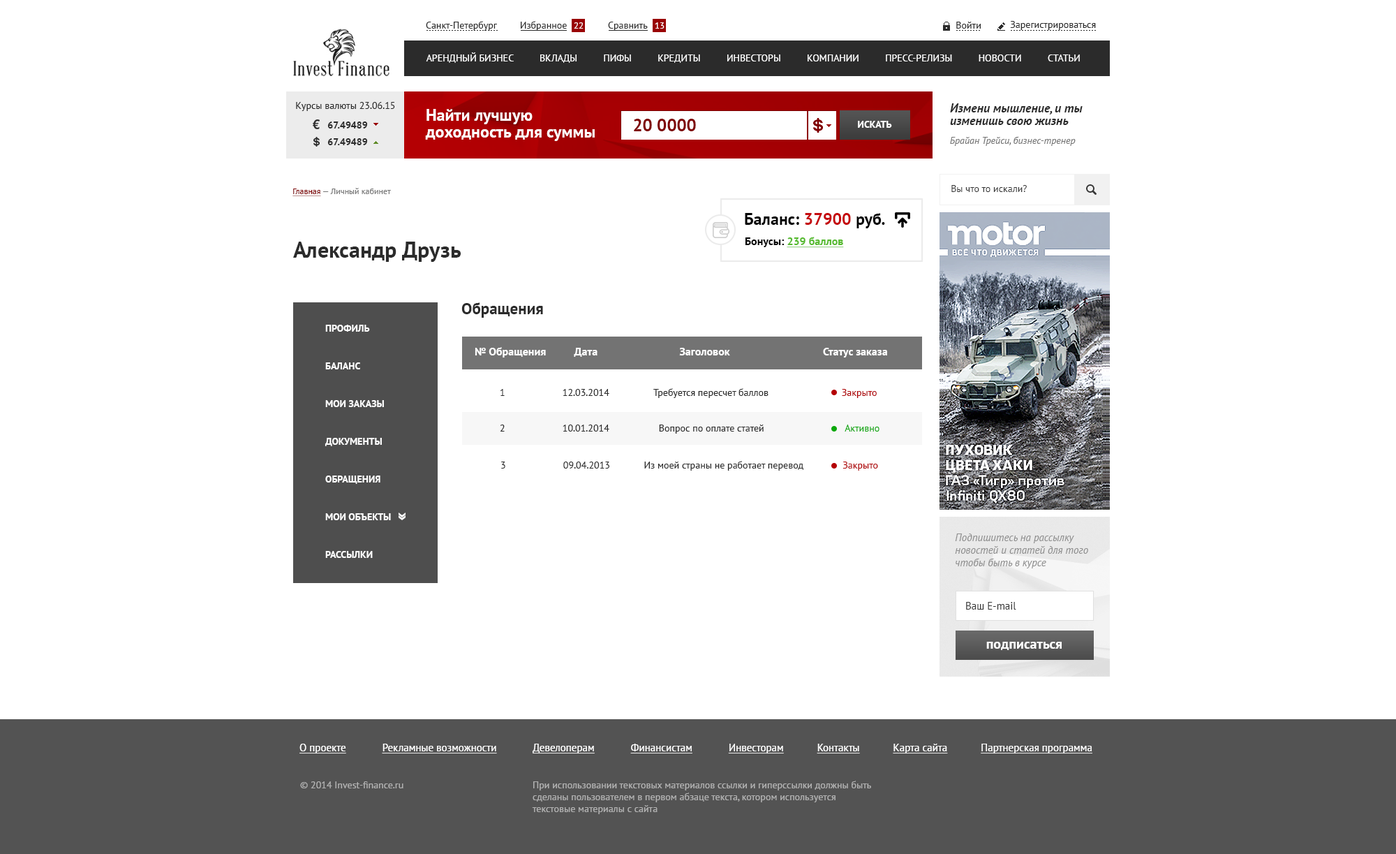
<style>
.page{position:relative;width:1396px;height:854px;background:#ffffff}
.page>*{position:absolute;margin:0}
.t1{font:9.8px "PTSans-Regular";color:#2b2b2b}
.t2{font:9.1px "PTSans-Regular";color:#ffffff}
.t3{font:9.8px "PTSans-Regular";color:#ffffff;text-transform:uppercase}
.t4{font:16.8px/16.8px "PTSans-Bold";color:#ffffff}
.t5{font:12.6px/12.6px "PTSans-BoldItalic";color:#2b2b2b}
.t6{font:9.8px/16.8px "PTSans-Bold";color:#2b2b2b}
.t7{font:17.5px "PTSans-Bold";color:#7f0002}
.t8{font:9.8px "PTSans-Bold";color:#ffffff;text-transform:uppercase}
.t9{font:9.8px "PTSans-Italic";color:#777777}
.t10{font:8.4px "PTSans-Regular";color:#777777}
.t11{font:8.4px "PTSans-Regular";color:#7f0002;text-decoration:underline}
.t12{font:16.8px "PTSans-Bold";color:#040404}
.t13{font:16.8px "PTSans-Bold";color:#c50a0e}
.t14{font:22.3px "PTSans-Bold";color:#2b2b2b}
.t15{font:11.2px "PTSans-Bold";color:#56bb2e;text-decoration:underline}
.t16{font:11.2px "PTSans-Bold";color:#040404}
.t17{font:16.1px "PTSans-Bold";color:#2b2b2b}
.t18{font:9.8px/12.6px "PTSans-Bold";color:#ffffff;text-transform:uppercase}
.t19{font:11.2px "PTSans-Bold";color:#ffffff}
.t20{font:9.8px "PTSans-Regular";color:#b00003}
.t21{font:9.8px "PTSans-Regular";color:#0ba80b}
.t22{font:10.5px/12.6px "PTSans-Italic";color:#777777}
.t23{font:10.5px "PTSans-Regular";color:#2b2b2b}
.t24{font:14px "PTSans-Bold";color:#ffffff}
.t25{font:10.5px "PTSans-Regular";color:#ffffff;text-decoration:underline}
.t26{font:9.8px "PTSans-Regular";color:#9b9b9b}
</style>
<div class="page">
<p class="t1" style="left:426px;top:21px;width:71px;height:10px">Санкт-Петербург</p>
<p class="t1" style="left:521px;top:21px;width:46px;height:10px">Избранное</p>
<p class="t2" style="left:574px;top:22px;width:10px;height:7px">22</p>
<p class="t1" style="left:608px;top:22px;width:40px;height:9px">Сравнить</p>
<p class="t2" style="left:655px;top:22px;width:10px;height:7px">13</p>
<p class="t1" style="left:957px;top:22px;width:24px;height:7px">Войти</p>
<p class="t1" style="left:1010px;top:21px;width:86px;height:9px">Зарегистрироваться</p>
<p class="t3" style="left:426px;top:52px;width:654px;height:11px">Арендный бизнес          Вклады          Пифы          Кредиты          Инвесторы          Компании          Пресс-релизы          Новости          Статьи</p>
<p class="t1" style="left:296px;top:102px;width:99px;height:9px">Курсы валюты 23.06.15</p>
<p class="t4" style="left:425px;top:109px;width:170px;height:32px">Найти лучшую<br>доходность для суммы</p>
<p class="t5" style="left:950px;top:103px;width:133px;height:22px">Измени мышление, и ты<br>изменишь свою жизнь</p>
<p class="t6" style="left:327px;top:121px;width:41px;height:24px">67.49489<br>67.49489</p>
<p class="t7" style="left:634px;top:119px;width:62px;height:12px">20 0000</p>
<p class="t8" style="left:858px;top:121px;width:34px;height:7px">Искать</p>
<p class="t9" style="left:950px;top:136px;width:126px;height:10px">Брайан Трейси, бизнес-тренер</p>
<p class="t1" style="left:952px;top:185px;width:75px;height:7px">Вы что то искали?</p>
<p class="t10" style="left:293px;top:188px;width:98px;height:8px"><span class="t11">Главная </span>— Личный кабинет</p>
<p class="t12" style="left:745px;top:213px;width:140px;height:15px">Баланс: <span class="t13">37900</span> руб.</p>
<p class="t14" style="left:293px;top:242px;width:168px;height:20px">Александр Друзь</p>
<p class="t15" style="left:745px;top:237px;width:99px;height:11px"><span class="t16">Бонусы: </span>239 баллов</p>
<p class="t17" style="left:462px;top:302px;width:81px;height:16px">Обращения</p>
<p class="t18" style="left:325px;top:325px;width:66px;height:233px">Профиль<br> <br><br>Баланс<br> <br><br>Мои заказы<br> <br> <br>Документы<br> <br><br>Обращения<br> <br><br>Мои объекты<br> <br><br>Рассылки</p>
<p class="t19" style="left:475px;top:347px;width:412px;height:10px">№ Обращения          Дата                             Заголовок                                 Статус заказа</p>
<p class="t1" style="left:500px;top:388px;width:377px;height:10px">1                      12.03.2014                 Требуется пересчет баллов                            <span class="t20">Закрыто</span></p>
<p class="t1" style="left:500px;top:425px;width:380px;height:9px">2                      10.01.2014                   Вопрос по оплате статей                               <span class="t21">Активно</span></p>
<p class="t1" style="left:501px;top:461px;width:377px;height:10px">3                      09.04.2013             Из моей страны не работает перевод               <span class="t20">Закрыто</span></p>
<p class="t22" style="left:955px;top:533px;width:134px;height:35px">Подпишитесь на рассылку<br>новостей и статей для того<br>чтобы быть в курсе</p>
<p class="t23" style="left:966px;top:602px;width:51px;height:8px">Ваш E-mail</p>
<p class="t24" style="left:987px;top:642px;width:75px;height:8px">подписаться</p>
<p class="t25" style="left:300px;top:744px;width:793px;height:9px">О проекте             Рекламные возможности             Девелоперам             Финансистам             Инвесторам            Контакты            Карта сайта            Партнерская программа</p>
<p class="t26" style="left:300px;top:781px;width:104px;height:7px">© 2014 Invest-finance.ru</p>
<p class="t26" style="left:532px;top:781px;width:339px;height:33px">При использовании текстовых материалов ссылки и гиперссылки должны быть <br>сделаны пользователем в первом абзаце текста, котором используется<br>текстовые материалы с сайта</p>
</div>
